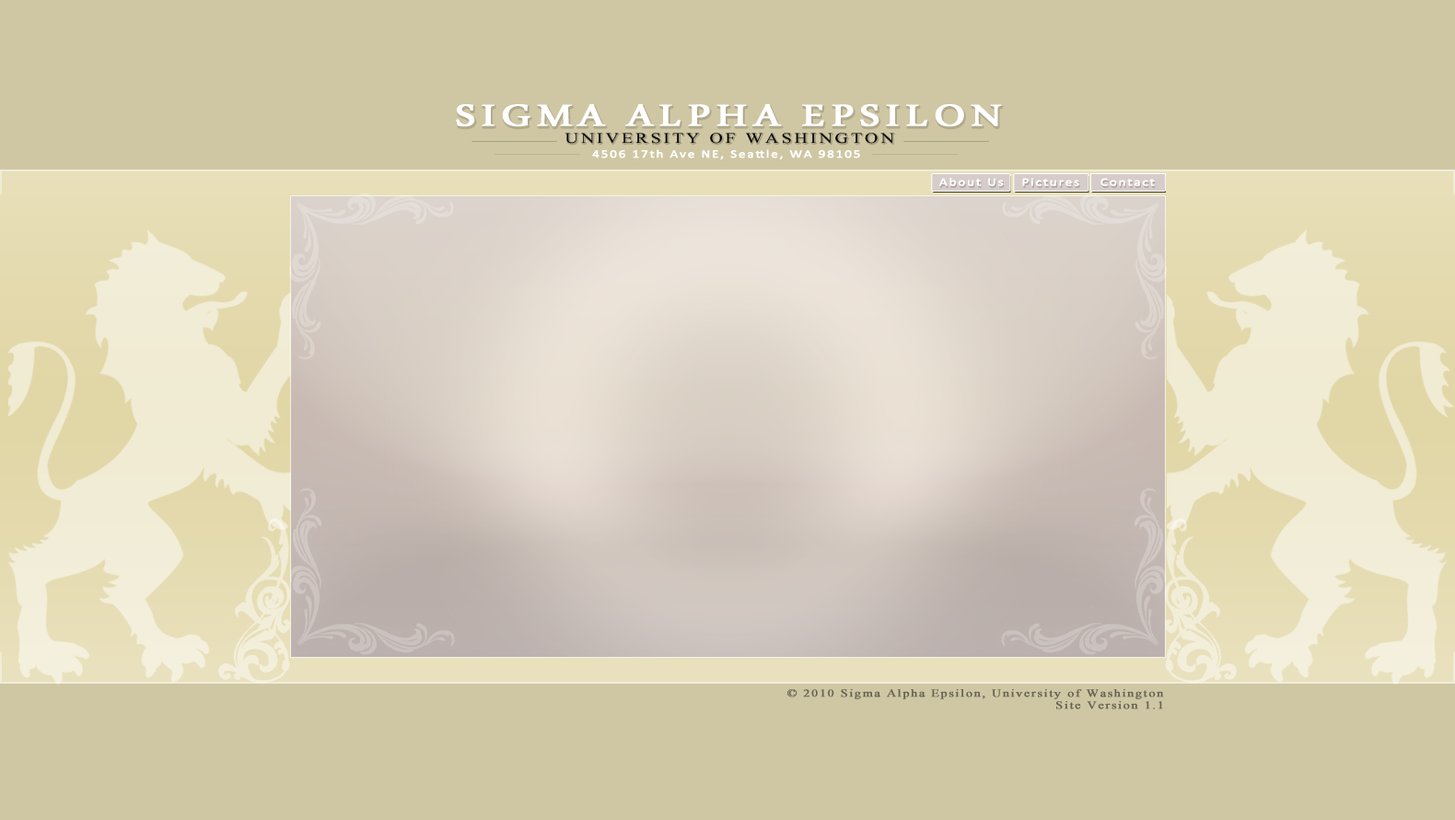
<style>
.page{position:relative;width:1455px;height:820px;background:#cfc7a4}
.page>*{position:absolute;margin:0}
.t1{font:44.2px "MicrosoftUighur";letter-spacing:0.1em;color:#ffffff;font-weight:bold;scale:1.25 1}
.t2{font:22.1px "AngsanaNew";letter-spacing:0.1em;color:#000000;scale:1.25 1}
.t3{font:11.1px "Calibri";letter-spacing:0.1em;color:#ffffff;font-weight:bold;scale:1.25 1}
.t4{font:10.3px "TimesNewRomanPSMT";letter-spacing:0.1em;color:#676352;font-weight:bold;scale:1.25 1}
</style>
<div class="page">
<p class="t1" style="left:456px;top:104px;width:546px;height:23px">SIGMA ALPHA EPSILON</p>
<p class="t2" style="left:564px;top:133px;width:330px;height:11px">UNIVERSITY OF WASHINGTON</p>
<p class="t3" style="left:592px;top:149px;width:268px;height:10px">4506 17th Ave NE, Seattle, WA 98105</p>
<p class="t3" style="left:939px;top:178px;width:65px;height:8px">About Us</p>
<p class="t3" style="left:1022px;top:178px;width:57px;height:8px">Pictures</p>
<p class="t3" style="left:1100px;top:178px;width:55px;height:8px">Contact</p>
<p class="t4" style="left:787px;top:689px;width:377px;height:10px">© 2010 Sigma Alpha Epsilon, University of Washington</p>
<p class="t4" style="left:1056px;top:701px;width:107px;height:8px">Site Version 1.1</p>
</div>
